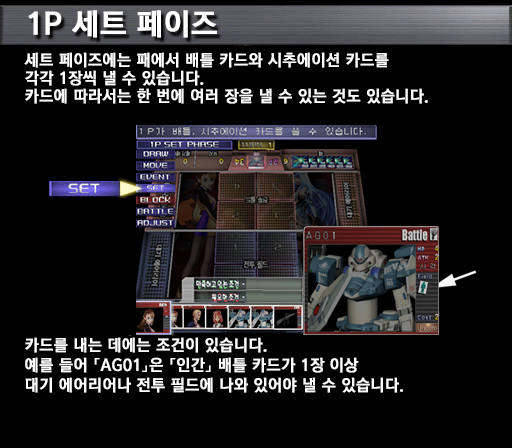
<style>
.page{position:relative;width:512px;height:448px;background:#000000}
.page>*{position:absolute;margin:0}
.t1{font:30px "KoreanGD15-R";color:#ffffff;font-weight:bold}
.t2{font:16px/18px "KoreanGD15-R";color:#ffffff;font-weight:bold}
.t3{font:16px/20px "KoreanGD15-R";color:#ffffff;font-weight:bold}
</style>
<div class="page">
<p class="t1" style="left:28px;top:10px;width:189px;height:28px">1P 세트 페이즈</p>
<p class="t2" style="left:24px;top:52px;width:404px;height:52px">세트 페이즈에는 패에서 배틀 카드와 시추에이션 카드를<br>각각 1장씩 낼 수 있습니다.<br>카드에 따라서는 한 번에 여러 장을 낼 수 있는 것도 있습니다.</p>
<p class="t3" style="left:25px;top:337px;width:378px;height:56px">카드를 내는 데에는 조건이 있습니다.<br>예를 들어 「AG01」은 「인간」 배틀 카드가 1장 이상<br>대기 에어리어나 전투 필드에 나와 있어야 낼 수 있습니다.</p>
</div>
